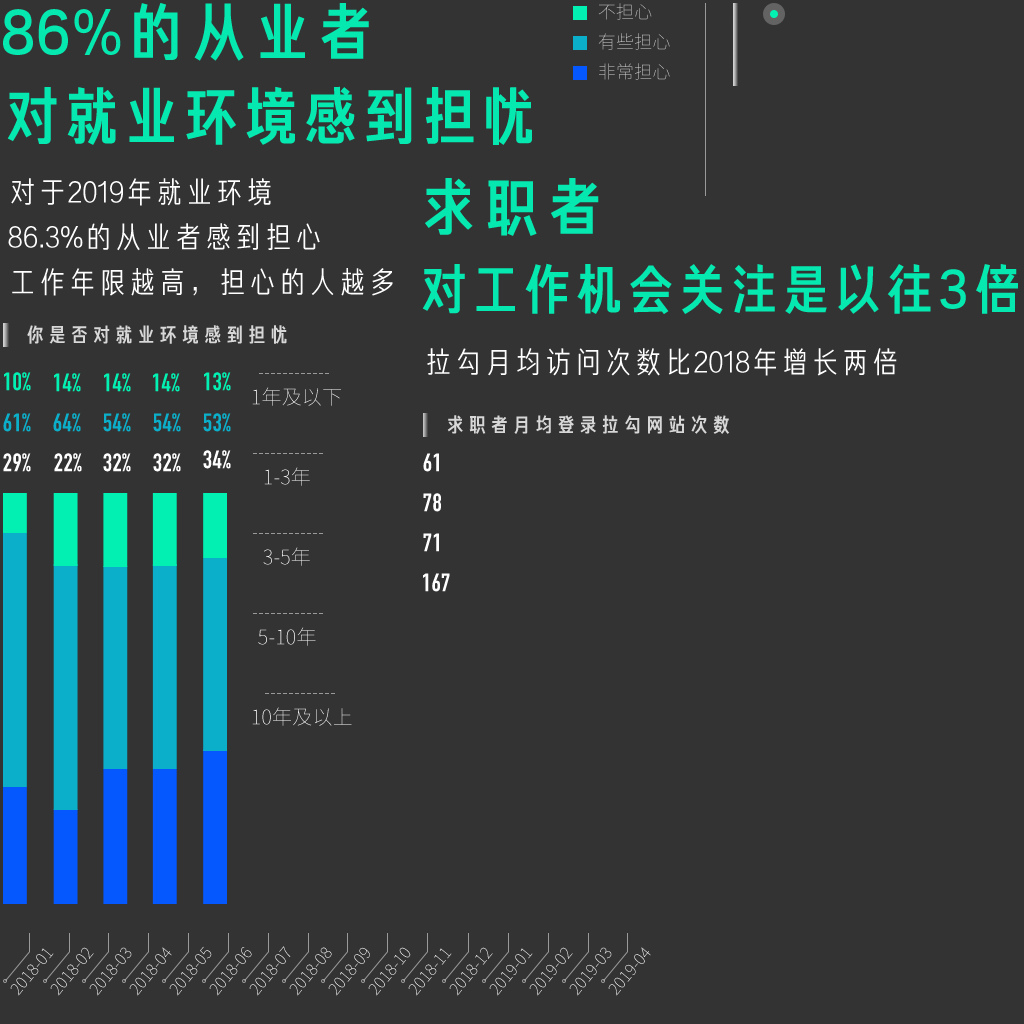
<style>
.page{position:relative;width:1024px;height:1024px;background:#333333}
.page>*{position:absolute;margin:0}
.t1{font:63.4px "FZCJHJW--GB1-0";color:#05e9b1}
.t2{font:18px "SourceHanSansCN-ExtraLight";letter-spacing:0.01em}
.t3{font:63.4px "FZCJHJW--GB1-0";letter-spacing:-0.06em;color:#05e9b1}
.t4{font:30px "FZJHJW--GB1-0";color:#ffffff}
.t5{font:55px "FZCJHJW--GB1-0";letter-spacing:-0.06em;color:#05e9b1}
.t6{font:55px "FZCJHJW--GB1-0";letter-spacing:0.04em;color:#05e9b1}
.t7{font:20.2px "FZCJHJW--GB1-0";letter-spacing:0.1em;color:#d7d7d7}
.t8{font:25px "DINCondensed-Bold";letter-spacing:0.01em;color:#02f1b3}
.t9{font:20px "SourceHanSansCN-ExtraLight";letter-spacing:0.01em;color:#ffffff}
.t10{font:25px "DINCondensed-Bold";letter-spacing:0.01em;color:#0cafca}
.t11{font:25px "DINCondensed-Bold";letter-spacing:0.01em;color:#ffffff}
.t12{font:20px "SourceHanSansCN-ExtraLight";letter-spacing:0.01em}
.t13{font:16px "SourceHanSansCN-ExtraLight";letter-spacing:0.01em}
</style>
<div class="page">
<p class="t1" style="left:3px;top:3px;width:366px;height:58px">86%的从业者</p>
<p class="t2" style="left:598px;top:3px;width:54px;height:17px">不担心</p>
<p class="t2" style="left:598px;top:33px;width:72px;height:17px">有些担心</p>
<p class="t2" style="left:599px;top:63px;width:71px;height:17px">非常担心</p>
<p class="t3" style="left:7px;top:86px;width:525px;height:59px">对就业环境感到担忧</p>
<p class="t4" style="left:11px;top:178px;width:260px;height:28px">对于2019年就业环境</p>
<p class="t1" style="left:425px;top:178px;width:174px;height:58px">求职者</p>
<p class="t4" style="left:8px;top:223px;width:312px;height:28px">86.3%的从业者感到担心</p>
<p class="t4" style="left:12px;top:268px;width:381px;height:28px">工作年限越高，担心的人越多</p>
<p class="t5" style="left:422px;top:263px;width:596px;height:51px">对工作机会关注是以<span class="t6">往3倍</span></p>
<p class="t7" style="left:27px;top:325px;width:260px;height:19px">你是否对就业环境感到担忧</p>
<p class="t4" style="left:427px;top:348px;width:470px;height:28px">拉勾月均访问次数比2018年增长两倍</p>
<p class="t8" style="left:4px;top:372px;width:27px;height:19px">10%</p>
<p class="t8" style="left:54px;top:373px;width:27px;height:19px">14%</p>
<p class="t8" style="left:104px;top:373px;width:27px;height:19px">14%</p>
<p class="t8" style="left:153px;top:373px;width:27px;height:19px">14%</p>
<p class="t8" style="left:204px;top:372px;width:27px;height:19px">13%</p>
<p class="t9" style="left:252px;top:387px;width:89px;height:19px">1年及以下</p>
<p class="t10" style="left:3px;top:413px;width:28px;height:19px">61%</p>
<p class="t10" style="left:53px;top:413px;width:28px;height:19px">64%</p>
<p class="t10" style="left:103px;top:413px;width:28px;height:19px">54%</p>
<p class="t10" style="left:153px;top:413px;width:28px;height:19px">54%</p>
<p class="t10" style="left:203px;top:413px;width:28px;height:19px">53%</p>
<p class="t7" style="left:447px;top:415px;width:283px;height:19px">求职者月均登录拉勾网站次数</p>
<p class="t11" style="left:3px;top:453px;width:28px;height:19px">29%</p>
<p class="t11" style="left:54px;top:453px;width:28px;height:19px">22%</p>
<p class="t11" style="left:103px;top:453px;width:28px;height:19px">32%</p>
<p class="t11" style="left:153px;top:453px;width:28px;height:19px">32%</p>
<p class="t11" style="left:203px;top:450px;width:28px;height:19px">34%</p>
<p class="t11" style="left:423px;top:453px;width:16px;height:19px">61</p>
<p class="t9" style="left:264px;top:467px;width:46px;height:19px">1-3年</p>
<p class="t11" style="left:423px;top:493px;width:18px;height:19px">78</p>
<p class="t11" style="left:423px;top:533px;width:16px;height:19px">71</p>
<p class="t12" style="left:263px;top:547px;width:47px;height:19px">3-5年</p>
<p class="t11" style="left:423px;top:573px;width:27px;height:19px">167</p>
<p class="t9" style="left:258px;top:627px;width:58px;height:19px">5-10年</p>
<p class="t9" style="left:252px;top:707px;width:100px;height:19px">10年及以上</p>
<p class="t13" style="left:10px;top:948px;width:44px;height:48px;rotate:-50deg">2018-01</p>
<p class="t13" style="left:50px;top:947px;width:44px;height:49px;rotate:-50deg">2018-02</p>
<p class="t13" style="left:89px;top:947px;width:43px;height:49px;rotate:-50deg">2018-03</p>
<p class="t13" style="left:129px;top:947px;width:43px;height:49px;rotate:-50deg">2018-04</p>
<p class="t13" style="left:169px;top:946px;width:43px;height:50px;rotate:-50deg">2018-05</p>
<p class="t13" style="left:209px;top:947px;width:43px;height:49px;rotate:-50deg">2018-06</p>
<p class="t13" style="left:249px;top:946px;width:42px;height:50px;rotate:-50deg">2018-07</p>
<p class="t13" style="left:289px;top:947px;width:43px;height:49px;rotate:-50deg">2018-08</p>
<p class="t13" style="left:328px;top:947px;width:42px;height:49px;rotate:-50deg">2018-09</p>
<p class="t13" style="left:368px;top:947px;width:43px;height:49px;rotate:-50deg">2018-10</p>
<p class="t13" style="left:408px;top:948px;width:44px;height:48px;rotate:-50deg">2018-11</p>
<p class="t13" style="left:449px;top:947px;width:44px;height:49px;rotate:-50deg">2018-12</p>
<p class="t13" style="left:489px;top:948px;width:44px;height:48px;rotate:-50deg">2019-01</p>
<p class="t13" style="left:529px;top:947px;width:44px;height:49px;rotate:-50deg">2019-02</p>
<p class="t13" style="left:569px;top:947px;width:43px;height:49px;rotate:-50deg">2019-03</p>
<p class="t13" style="left:608px;top:947px;width:43px;height:49px;rotate:-50deg">2019-04</p>
</div>
